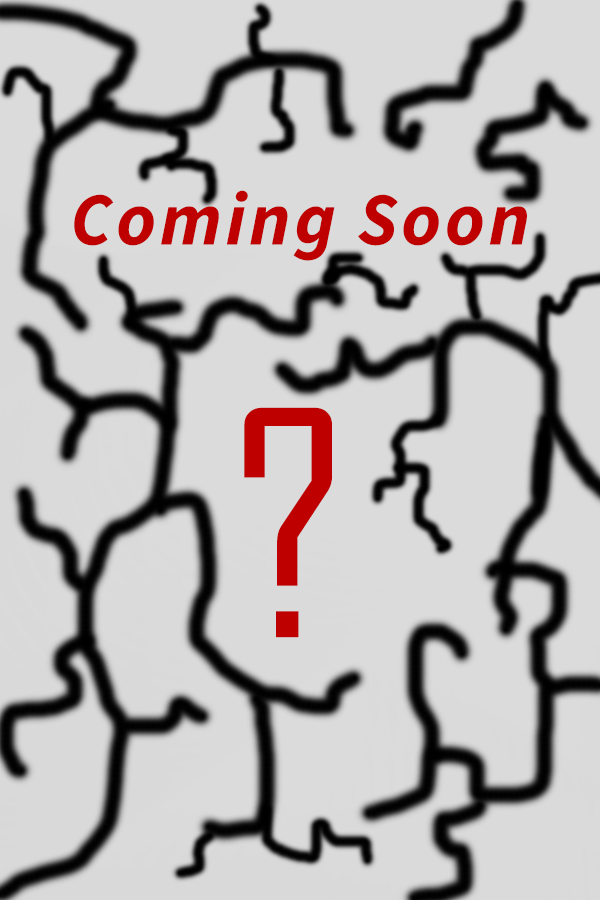
<style>
.page{position:relative;width:600px;height:900px;background:#dbdbdb}
.page>*{position:absolute;margin:0}
.t1{font:75px "SourceSansItalic-BoldItalic";letter-spacing:0.05em;color:#be0000}
.t2{font:300px "AgencyFB-Reg";color:#be0000}
</style>
<div class="page">
<p class="t1" style="left:74px;top:190px;width:453px;height:71px">Coming Soon</p>
<p class="t2" style="left:244px;top:407px;width:88px;height:231px">?</p>
</div>
